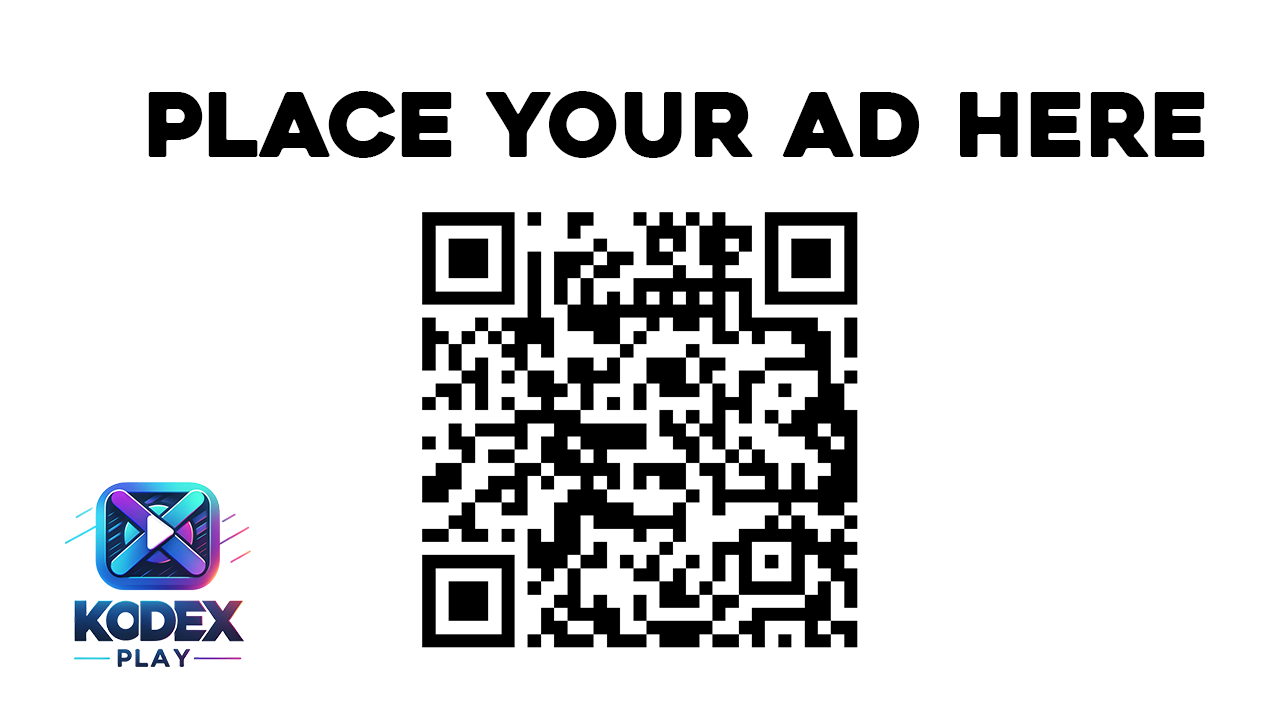
<style>
.page{position:relative;width:1280px;height:720px;background:#ffffff}
.page>*{position:absolute;margin:0}
.t1{font:89px "Heavitas";color:#000000}
</style>
<div class="page">
<p class="t1" style="left:148px;top:91px;width:1057px;height:67px">Place your Ad here</p>
</div>
